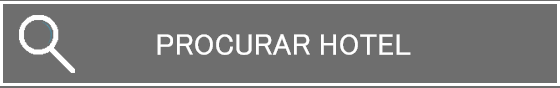
<style>
.page{position:relative;width:560px;height:88px;background:#6e6e6e}
.page>*{position:absolute;margin:0}
.t1{font:30px "MS-PGothic";color:#ffffff}
</style>
<div class="page">
<p class="t1" style="left:157px;top:34px;width:254px;height:21px">PROCURAR HOTEL</p>
</div>
